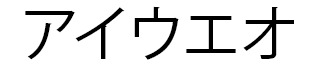
<style>
.page{position:relative;width:320px;height:64px;background:#ffffff}
.page>*{position:absolute;margin:0}
.t1{font:60px "KozGoPr6N-Regular";color:#000000}
</style>
<div class="page">
<p class="t1" style="left:25px;top:6px;width:269px;height:54px">アイウエオ</p>
</div>
